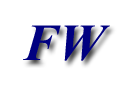
<style>
.page{position:relative;width:127px;height:108px;background:#ffffff}
.page>*{position:absolute;margin:0}
.t1{font:52px "TimesNewRomanPS-BoldItalicMT";color:#000080}
</style>
<div class="page">
<p class="t1" style="left:23px;top:25px;width:87px;height:36px">FW</p>
</div>
